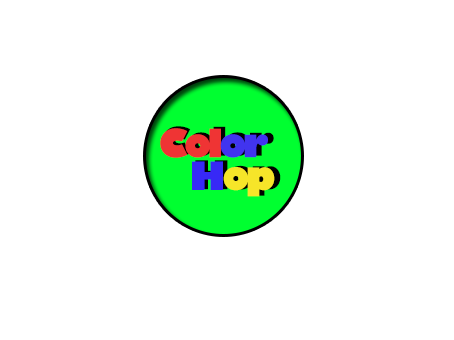
<style>
.page{position:relative;width:454px;height:340px;background:#ffffff}
.page>*{position:absolute;margin:0}
.t1{font:67px/5.6px "GillSans-UltraBold";letter-spacing:-0.1em;color:#ef3434}
.t2{font:67px/5.6px "GillSans-UltraBold";letter-spacing:-0.1em;color:#000000}
.t3{font:67px/5.6px "GillSans-UltraBold";letter-spacing:-0.1em;color:#4134ef}
.t4{font:67px/5.6px "GillSans-UltraBold";letter-spacing:-0.1em;color:#3729f6}
.t5{font:67px/5.6px "GillSans-UltraBold";letter-spacing:-0.1em;color:#f6e529}
.t6{font:65.4px/5.5px "GillSans-UltraBold";letter-spacing:-0.1em;color:#ef3434}
.t7{font:65.4px/5.5px "GillSans-UltraBold";letter-spacing:-0.1em;color:#000000}
.t8{font:65.4px/5.5px "GillSans-UltraBold";letter-spacing:-0.1em;color:#4134ef}
.t9{font:65.4px/5.5px "GillSans-UltraBold";letter-spacing:-0.1em;color:#3729f6}
.t10{font:65.4px/5.5px "GillSans-UltraBold";letter-spacing:-0.1em;color:#f6e529}
</style>
<div class="page">
<p class="t1" style="left:162px;top:126px;width:119px;height:70px;text-align:center"><span class="t2"><br><br><br></span><br><br>Col<span class="t3">or<br><br><br><br><br><br> </span><span class="t4">H</span><span class="t5">op</span></p>
<p class="t6" style="left:160px;top:128px;width:115px;height:69px;text-align:center"><span class="t7"><br><br><br></span><br><br>Col<span class="t8">or<br><br><br><br><br><br> </span><span class="t9">H</span><span class="t10">op</span></p>
</div>
